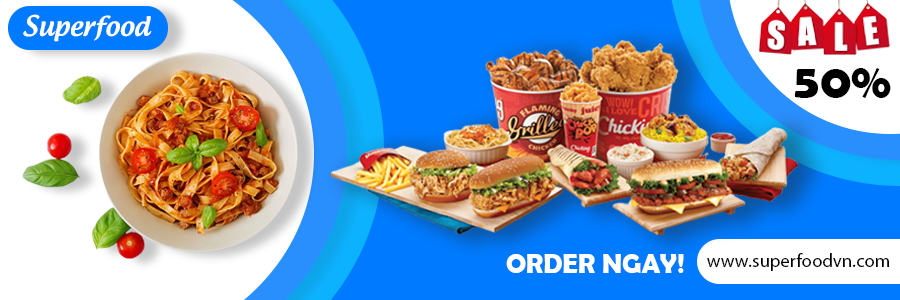
<style>
.page{position:relative;width:900px;height:300px}
.page>*{position:absolute;margin:0}
.t1{font:27.1px "UTM-Androgyne";color:#ffffff}
.t2{font:50px "BerlinSansFBDemi-Bold";color:#000000}
.t3{font:27.1px "BerlinSansFBDemi-Bold";color:#ffffff}
.t4{font:18.7px "MyriadPro-Regular";color:#000000}
</style>
<div class="page">
<p class="t1" style="left:23px;top:14px;width:129px;height:28px">Superfood</p>
<p class="t2" style="left:794px;top:68px;width:97px;height:30px">50%</p>
<p class="t3" style="left:506px;top:254px;width:178px;height:19px">ORDER NGAY!</p>
<p class="t4" style="left:707px;top:253px;width:182px;height:18px">www.superfoodvn.com</p>
</div>
